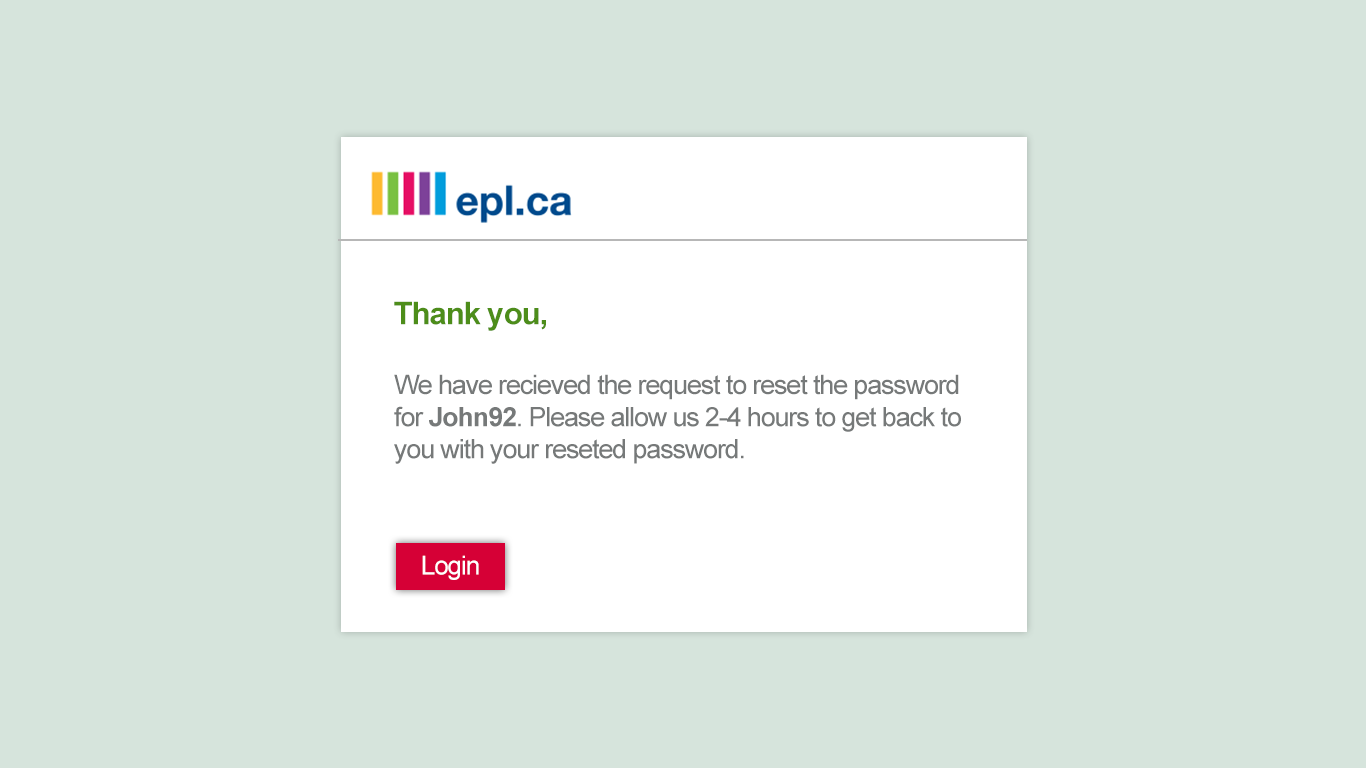
<style>
.page{position:relative;width:1366px;height:768px;background:#d6e4dc}
.page>*{position:absolute;margin:0}
.t1{font:31.5px "Arial-BoldMT";letter-spacing:-0.04em;color:#4d8d1a}
.t2{font:26.8px "ArialMT";letter-spacing:-0.04em;color:#767979}
.t3{font:26.8px "Arial-BoldMT";letter-spacing:-0.04em;color:#767979}
.t4{font:26px "ArialMT";letter-spacing:-0.04em;color:#ffffff}
</style>
<div class="page">
<p class="t1" style="left:394px;top:301px;width:152px;height:30px">Thank you,</p>
<p class="t2" style="left:394px;top:374px;width:567px;height:90px">We have recieved the request to reset the password<br>for <span class="t3">John92</span>. Please allow us 2-4 hours to get back to<br>you with your reseted password.</p>
<p class="t4" style="left:422px;top:555px;width:57px;height:25px">Login</p>
</div>
